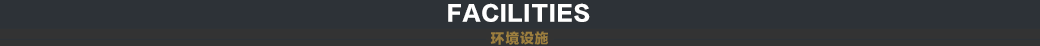
<style>
.page{position:relative;width:1040px;height:46px;background:#2d3237}
.page>*{position:absolute;margin:0}
.t1{font:35px "FZLTTHJW--GB1-0";letter-spacing:0.05em;color:#ffffff}
.t2{font:24px "FZLTTHJW--GB1-0";letter-spacing:0.05em;color:#9c7e3e}
</style>
<div class="page">
<p class="t1" style="left:448px;top:3px;width:142px;height:19px">FACILITIES</p>
<p class="t2" style="left:490px;top:31px;width:59px;height:14px">环境设施</p>
</div>
